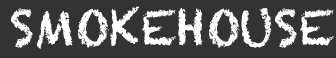
<style>
.page{position:relative;width:336px;height:58px;background:#333333}
.page>*{position:absolute;margin:0}
.t1{font:48px "Chalkduster";color:#ffffff}
</style>
<div class="page">
<p class="t1" style="left:11px;top:6px;width:323px;height:43px">SMOKEHOUSE</p>
</div>
